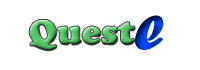
<style>
.page{position:relative;width:200px;height:70px;background:#ffffff}
.page>*{position:absolute;margin:0}
.t1{font:72px "ForteMT"}
.t2{font:36px "CooperBlack"}
</style>
<div class="page">
<p class="t1" style="left:135px;top:15px;width:29px;height:35px">e</p>
<p class="t2" style="left:29px;top:20px;width:106px;height:31px">Quest</p>
</div>
